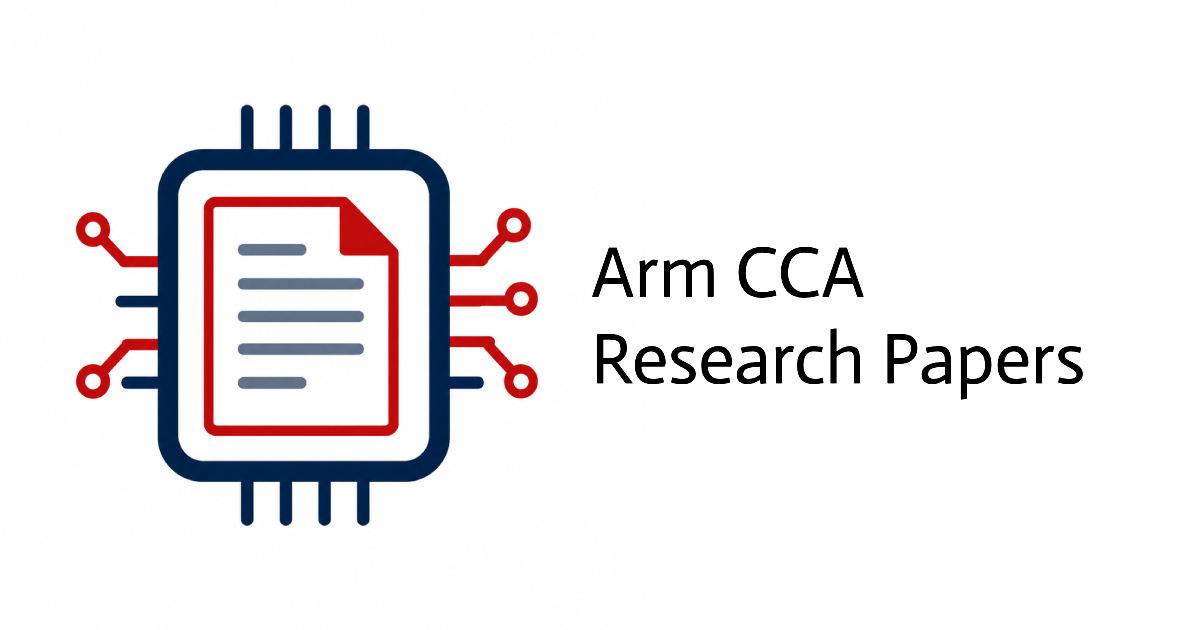
<style>
.page{position:relative;width:1200px;height:630px;background:#ffffff}
.page>*{position:absolute;margin:0}
.t1{font:72px "Actor-Regular";color:#000000}
</style>
<div class="page">
<p class="t1" style="left:592px;top:246px;width:491px;height:154px">Arm CCA<br>Research Papers</p>
</div>
